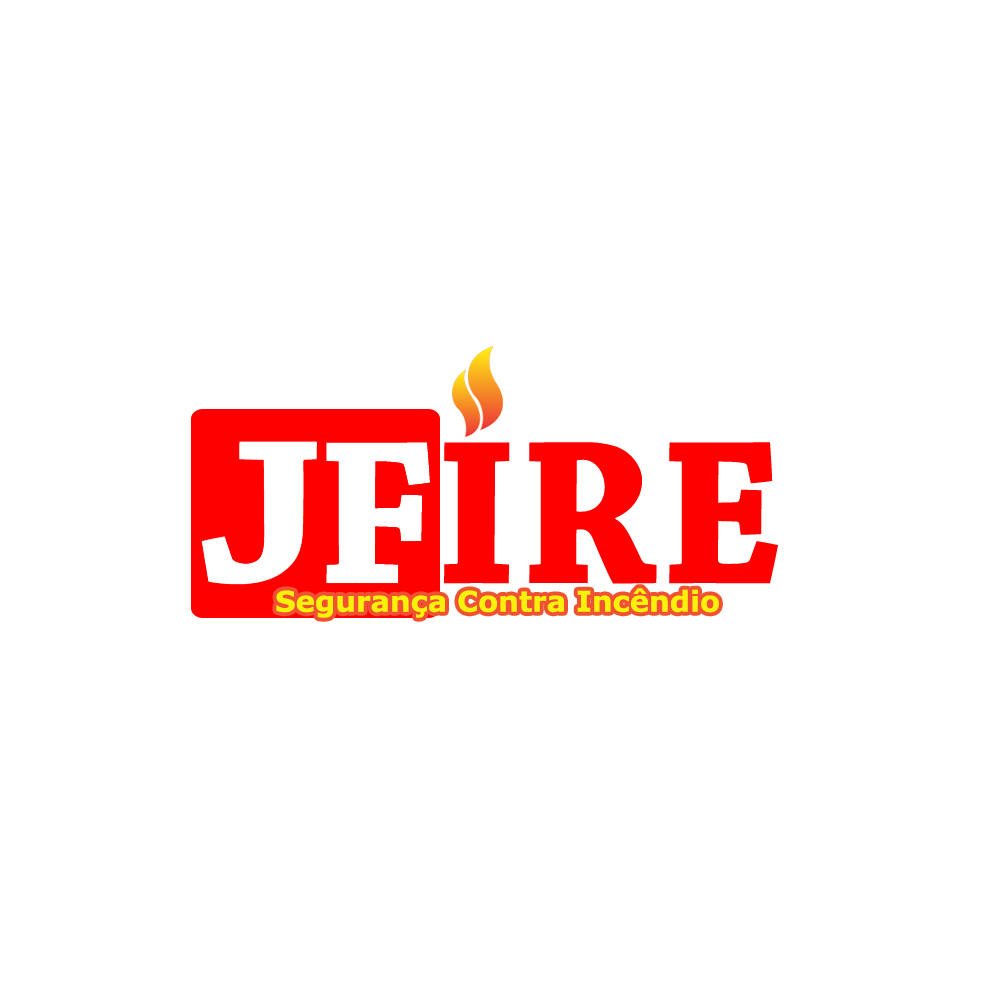
<style>
.page{position:relative;width:1000px;height:1000px;background:#ffffff}
.page>*{position:absolute;margin:0}
.t1{font:28.5px "Verdana-Bold";color:#faf109}
</style>
<div class="page">
<p class="t1" style="left:276px;top:588px;width:443px;height:30px">Segurança Contra Incêndio</p>
</div>
